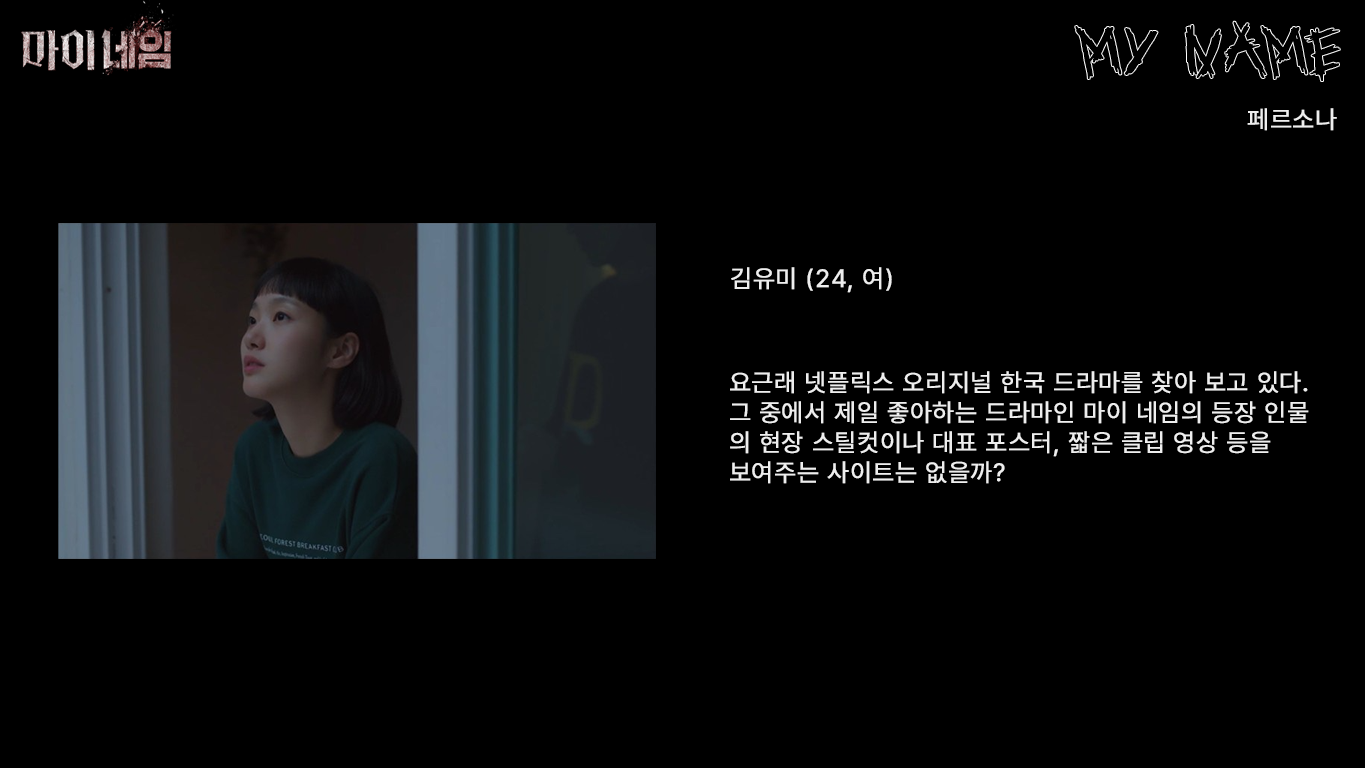
<style>
.page{position:relative;width:1365px;height:768px;background:#000000}
.page>*{position:absolute;margin:0}
.t1{font:25px "Pretendard-Regular";letter-spacing:0.03em;color:#eeeeee;font-weight:bold}
.t2{font:25px/30px "Pretendard-Regular";letter-spacing:0.03em;color:#eeeeee;font-weight:bold}
</style>
<div class="page">
<p class="t1" style="left:1247px;top:108px;width:90px;height:23px">페르소나</p>
<p class="t1" style="left:731px;top:267px;width:161px;height:26px">김유미 (24, 여)</p>
<p class="t2" style="left:730px;top:371px;width:579px;height:113px">요근래 넷플릭스 오리지널 한국 드라마를 찾아 보고 있다.<br>그 중에서 제일 좋아하는 드라마인 마이 네임의 등장 인물<br>의 현장 스틸컷이나 대표 포스터, 짧은 클립 영상 등을<br>보여주는 사이트는 없을까?</p>
</div>
